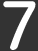
<style>
.page{position:relative;width:38px;height:51px;background:#333333}
.page>*{position:absolute;margin:0}
.t1{font:66.7px "RoundedMplus1c-Medium";color:#ffffff}
</style>
<div class="page">
<p class="t1" style="left:3px;top:1px;width:33px;height:49px">7</p>
</div>
